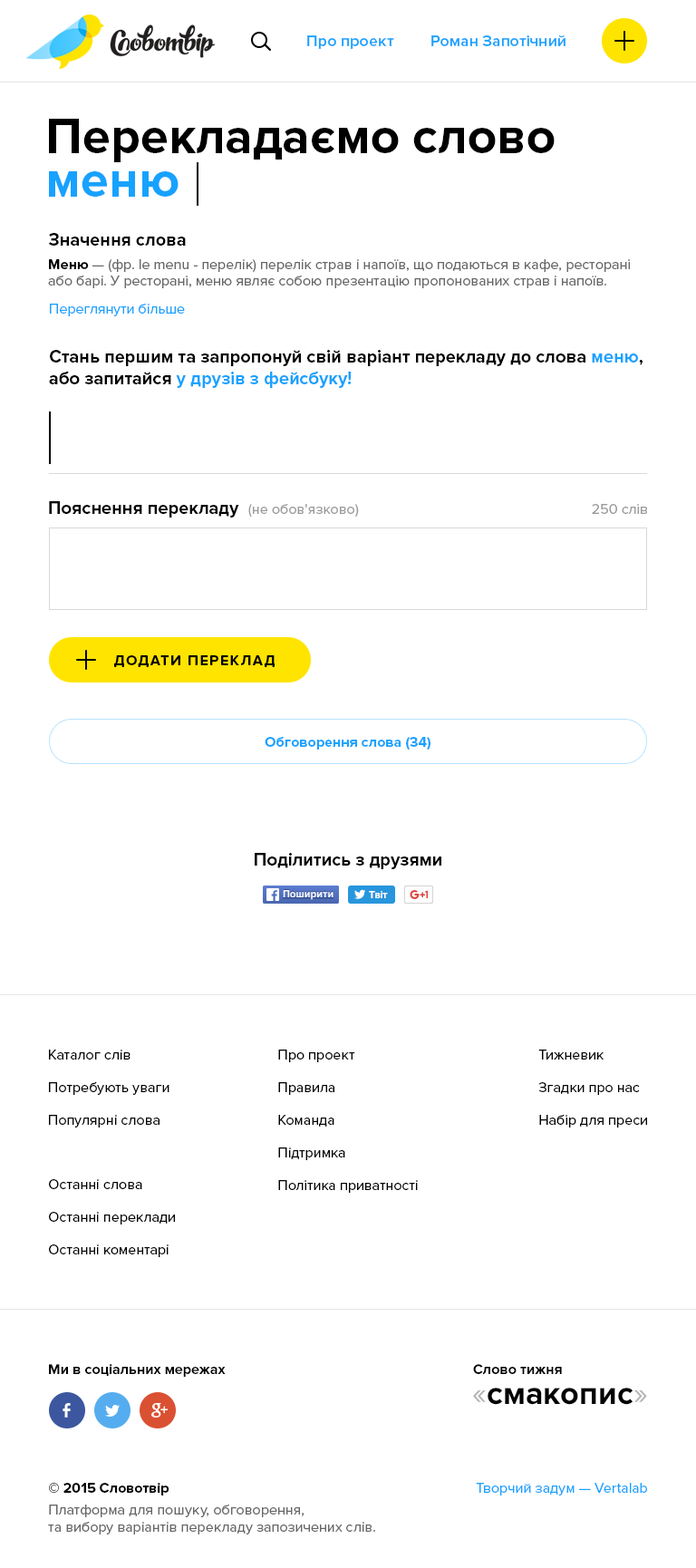
<style>
.page{position:relative;width:696px;height:1568px;background:#ffffff}
.page>*{position:absolute;margin:0}
.t1{font:16.3px "ProximaNova-Semibold";color:#17a2ff}
.t2{font:50.8px "ProximaNova-Bold";color:#000000}
.t3{font:50.8px "ProximaNova-Bold";color:#17a2ff}
.t4{font:18.1px "ProximaNova-Bold";color:#000000}
.t5{font:14.5px/16.3px "ProximaNova-Regular";color:#666666}
.t6{font:14.5px/16.3px "ProximaNova-Bold";color:#000000}
.t7{font:14.5px "ProximaNova-Regular";color:#17a2ff}
.t8{font:18.1px "ProximaNova-Bold";color:#17a2ff}
.t9{font:14.5px "ProximaNova-Regular";color:#999999}
.t10{font:14.5px "ProximaNova-Bold";letter-spacing:0.1em;color:#000000;text-transform:uppercase}
.t11{font:14.5px "ProximaNova-Bold";color:#17a2ff}
.t12{font:14.5px/32.6px "ProximaNova-Regular";color:#000000}
.t13{font:14.5px/32.6px "ProximaNova-Regular";color:#010101}
.t14{font:14.5px "ProximaNova-Bold";color:#010101}
.t15{font:32.6px "ProximaNova-Bold";color:#000000}
.t16{font:32.6px "ProximaNova-Regular";color:#b3b3b3}
.t17{font:14.5px "ProximaNova-Regular";color:#666666}
.t18{font:14.5px/19.9px "ProximaNova-Bold";color:#000000}
.t19{font:14.5px/21.8px "ProximaNova-Regular";color:#666666}
</style>
<div class="page">
<p class="t1" style="left:307px;top:35px;width:87px;height:14px">Про проект</p>
<p class="t1" style="left:431px;top:35px;width:135px;height:11px">Роман Запотічний</p>
<p class="t2" style="left:49px;top:119px;width:506px;height:43px">Перекладаємо слово</p>
<p class="t3" style="left:49px;top:171px;width:130px;height:26px">меню</p>
<p class="t4" style="left:48px;top:233px;width:138px;height:13px">Значення слова</p>
<p class="t5" style="left:48px;top:259px;width:582px;height:29px"><span class="t6">Меню</span> — (фр. le menu - перелік) перелік страв і напоїв, що подаються в кафе, ресторані або барі. У ресторані, меню являє собою презентацію пропонованих страв і напоїв.</p>
<p class="t7" style="left:50px;top:304px;width:135px;height:12px">Переглянути більше</p>
<p class="t4" style="left:49px;top:350px;width:594px;height:38px">Стань першим та запропонуй свій варіант перекладу до слова <span class="t8">меню</span>,<br>або запитайся <span class="t8">у друзів з фейсбуку!</span></p>
<p class="t4" style="left:49px;top:501px;width:190px;height:17px">Пояснення перекладу</p>
<p class="t9" style="left:248px;top:504px;width:111px;height:14px">(не обов'язково)</p>
<p class="t9" style="left:592px;top:504px;width:55px;height:10px">250 слів</p>
<p class="t10" style="left:114px;top:655px;width:161px;height:12px">Додати переклад</p>
<p class="t11" style="left:265px;top:737px;width:166px;height:13px">Обговорення слова (34)</p>
<p class="t4" style="left:255px;top:853px;width:186px;height:16px">Поділитись з друзями</p>
<p class="t12" style="left:49px;top:1050px;width:120px;height:78px">Каталог слів<br>Потребують уваги<br>Популярні слова</p>
<p class="t12" style="left:278px;top:1050px;width:140px;height:143px">Про проект<br>Правила<br>Команда<br>Підтримка<br>Політика приватності</p>
<p class="t13" style="left:538px;top:1050px;width:109px;height:78px">Тижневик<br>Згадки про нас<br>Набір для преси</p>
<p class="t12" style="left:49px;top:1179px;width:126px;height:78px">Останні слова<br>Останні переклади<br>Останні коментарі</p>
<p class="t14" style="left:49px;top:1364px;width:177px;height:13px">Ми в соціальних мережах</p>
<p class="t14" style="left:473px;top:1364px;width:89px;height:10px">Слово тижня</p>
<p class="t15" style="left:473px;top:1388px;width:174px;height:17px"><span class="t16">«</span>смакопис<span class="t16">»</span></p>
<p class="t17" style="left:48px;top:1483px;width:327px;height:51px"><span class="t18">© 2015 Словотвір<br></span><span class="t19">Платформа для пошуку, обговорення,<br></span>та вибору варіантів перекладу запозичених слів.</p>
<p class="t7" style="left:476px;top:1483px;width:171px;height:12px">Творчий задум — Vertalab</p>
</div>
